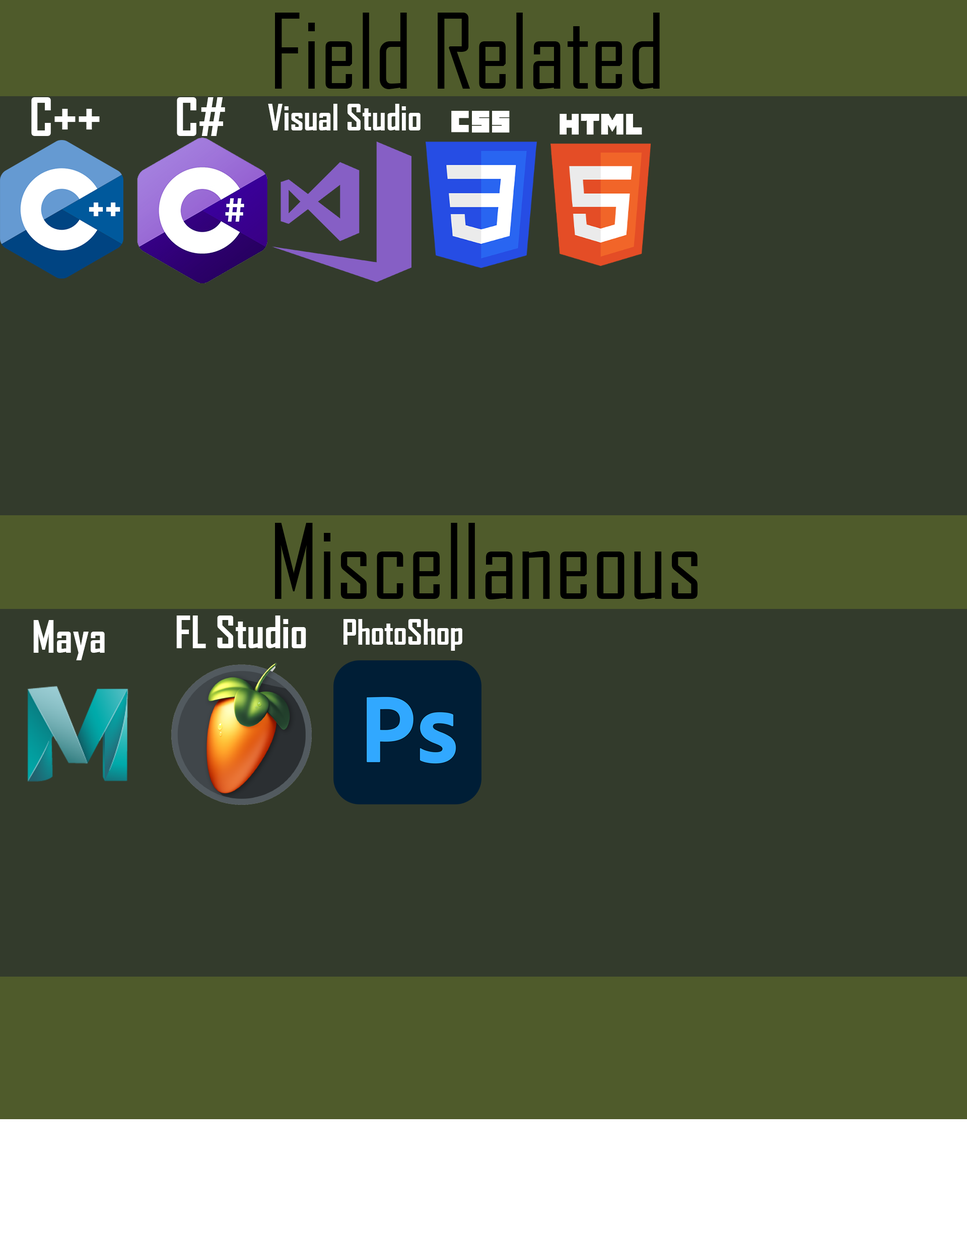
<style>
.page{position:relative;width:967px;height:1233px;background:#333b2c}
.page>*{position:absolute;margin:0}
.t1{font:99px "AgencyFB-Reg";color:#000000}
.t2{font:51px "AgencyFB-Bold";color:#ffffff}
.t3{font:35.1px "AgencyFB-Bold";color:#ffffff}
.t4{font:42.8px "AgencyFB-Bold";color:#ffffff}
.t5{font:33.6px "AgencyFB-Bold";color:#ffffff}
</style>
<div class="page">
<p class="t1" style="left:275px;top:13px;width:385px;height:76px">Field Related</p>
<p class="t2" style="left:31px;top:97px;width:69px;height:39px">C++</p>
<p class="t2" style="left:177px;top:97px;width:48px;height:39px">C#</p>
<p class="t3" style="left:268px;top:104px;width:153px;height:26px">Visual Studio</p>
<p class="t1" style="left:275px;top:523px;width:423px;height:76px">Miscellaneous</p>
<p class="t4" style="left:176px;top:616px;width:130px;height:32px">FL Studio</p>
<p class="t4" style="left:33px;top:620px;width:72px;height:40px">Maya</p>
<p class="t5" style="left:344px;top:619px;width:118px;height:32px">PhotoShop</p>
</div>
